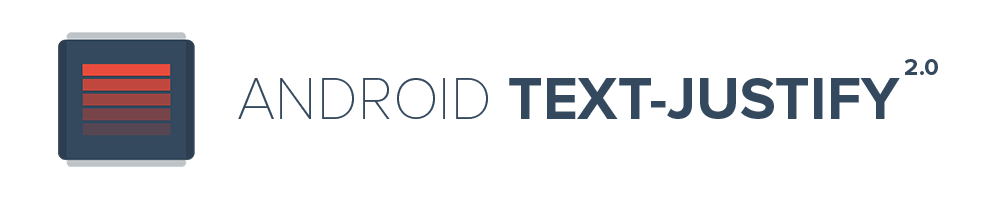
<style>
.page{position:relative;width:1000px;height:200px;background:#ffffff}
.page>*{position:absolute;margin:0}
.t1{font:24px "ProximaNova-Bold";color:#34495e}
.t2{font:60px "ProximaNova-Bold";color:#34495e}
.t3{font:60px "ProximaNovaT-Thin";color:#34495e}
</style>
<div class="page">
<p class="t1" style="left:904px;top:59px;width:34px;height:16px">2.0</p>
<p class="t2" style="left:238px;top:78px;width:662px;height:41px"><span class="t3">ANDROID </span>TEXT-JUSTIFY</p>
</div>
